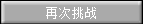
<style>
.page{position:relative;width:143px;height:24px;background:#aaaaaa}
.page>*{position:absolute;margin:0}
.t1{font:12px "NSimSun";letter-spacing:0.1em;color:#ffffff}
</style>
<div class="page">
<p class="t1" style="left:46px;top:7px;width:50px;height:12px">再次挑战</p>
</div>
